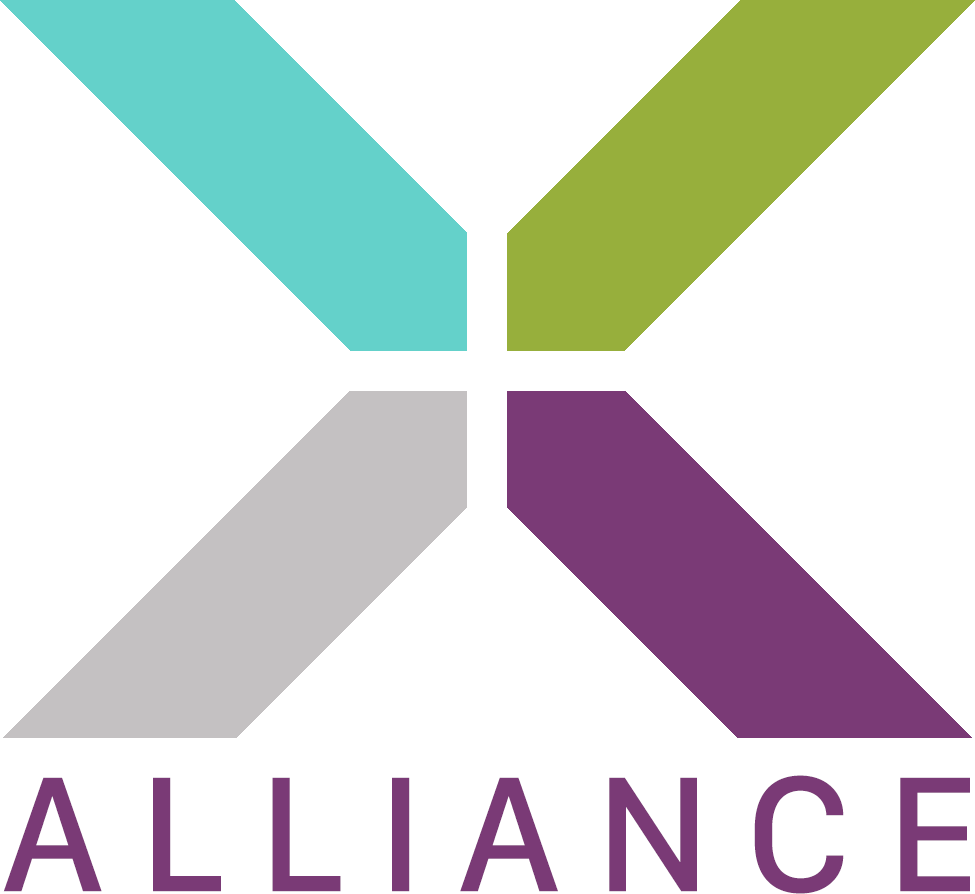
<style>
.page{position:relative;width:975px;height:894px;background:#ffffff}
.page>*{position:absolute;margin:0}
.t1{font:170px "SanFranciscoDisplay-Medium";letter-spacing:0.215em;color:#7a3a76}
</style>
<div class="page">
<p class="t1" style="left:3px;top:775px;width:967px;height:119px">ALLIANCE</p>
</div>
